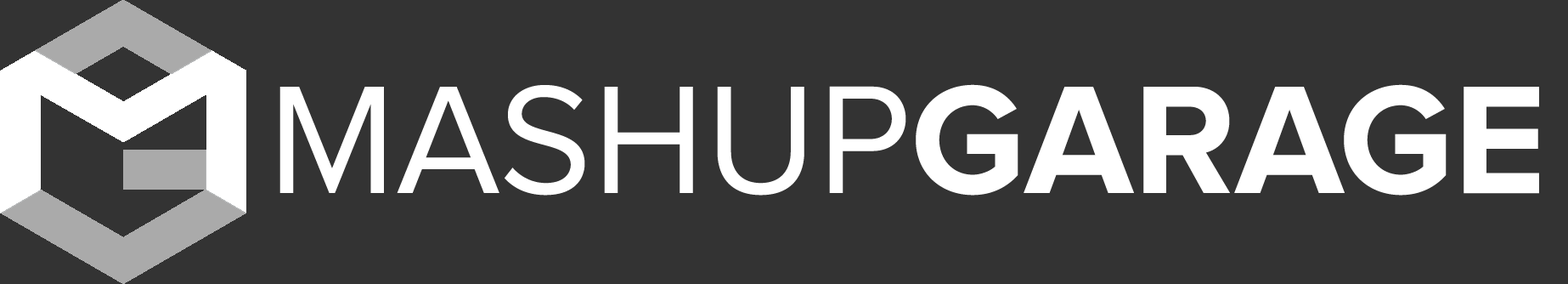
<style>
.page{position:relative;width:1568px;height:284px;background:#333333}
.page>*{position:absolute;margin:0}
.t1{font:159.3px "ProximaNova-Regular";color:#ffffff}
.t2{font:159.3px "ProximaNova-Bold";color:#ffffff}
</style>
<div class="page">
<p class="t1" style="left:279px;top:84px;width:1260px;height:111px">MASHUP<span class="t2">GARAGE</span></p>
</div>
